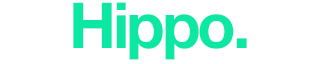
<style>
.page{position:relative;width:320px;height:64px;background:#ffffff}
.page>*{position:absolute;margin:0}
.t1{font:63.5px "HelveticaNeue-Bold";letter-spacing:-0.05em;color:#0de7a4}
</style>
<div class="page">
<p class="t1" style="left:73px;top:2px;width:174px;height:58px">Hippo.</p>
</div>
